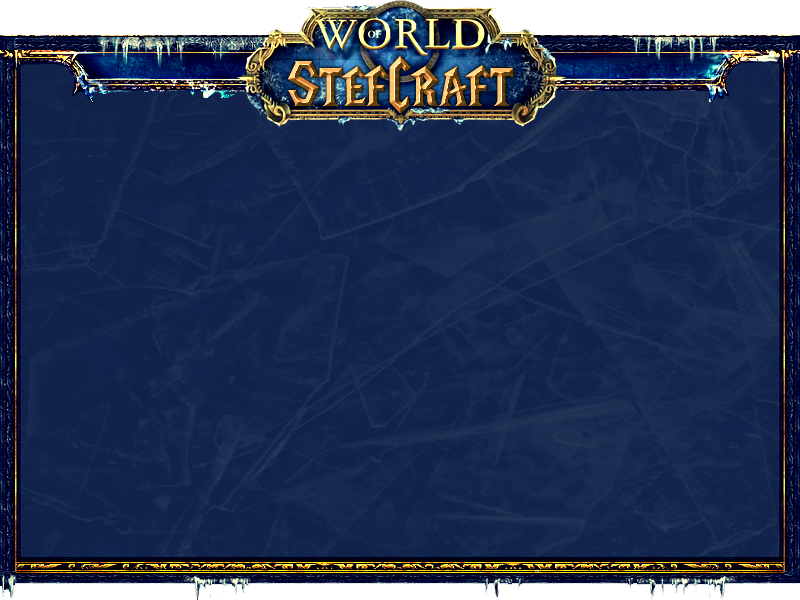
<style>
.page{position:relative;width:800px;height:600px}
.page>*{position:absolute;margin:0}
.t1{font:66px "LifeCraft"}
</style>
<div class="page">
<p class="t1" style="left:287px;top:56px;width:227px;height:58px">StefCraft</p>
<p class="t1" style="left:287px;top:56px;width:227px;height:58px">StefCraft</p>
<p class="t1" style="left:287px;top:56px;width:227px;height:58px">StefCraft</p>
</div>
